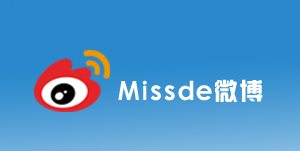
<style>
.page{position:relative;width:300px;height:151px;background:#2989cc}
.page>*{position:absolute;margin:0}
.t1{font:24px "hzgb";letter-spacing:0.05em;color:#ffffff}
</style>
<div class="page">
<p class="t1" style="left:118px;top:79px;width:145px;height:23px">Missde微博</p>
</div>
